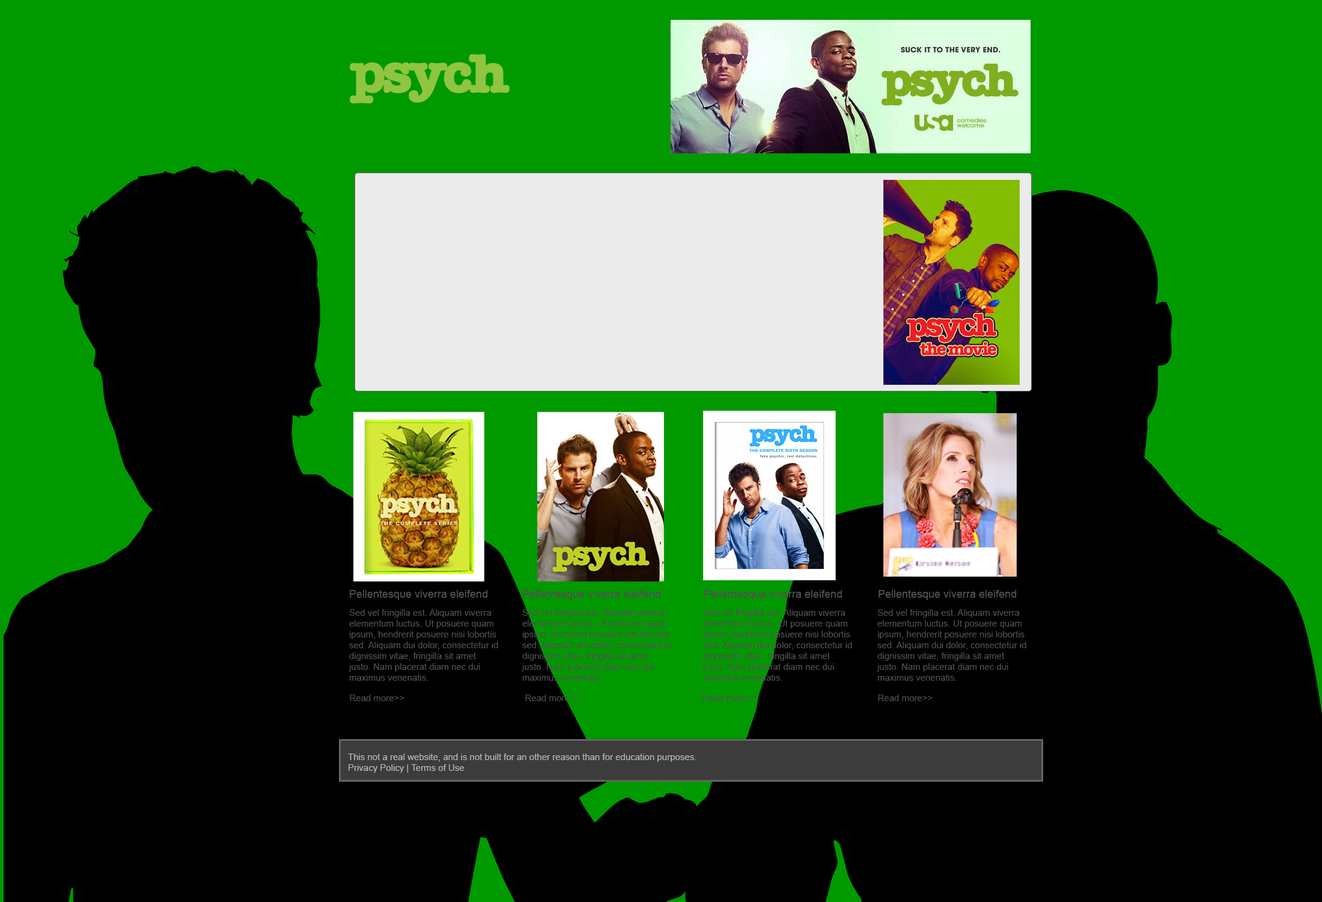
<style>
.page{position:relative;width:1322px;height:902px;background:#000000}
.page>*{position:absolute;margin:0}
.t1{font:10.8px "ArialMT";color:#4e4e4e}
.t2{font:9px "ArialMT";color:#4f4f4f}
.t3{font:9px "ArialMT";color:#4e4e4e}
.t4{font:9px "ArialMT";color:#bababa}
</style>
<div class="page">
<p class="t1" style="left:350px;top:590px;width:138px;height:10px">Pellentesque viverra eleifend ipsum ut sollicitudin.</p>
<p class="t1" style="left:523px;top:590px;width:138px;height:10px">Pellentesque viverra eleifend ipsum ut sollicitudin.</p>
<p class="t1" style="left:705px;top:590px;width:138px;height:10px">Pellentesque viverra eleifend ipsum ut sollicitudin.</p>
<p class="t1" style="left:879px;top:590px;width:138px;height:10px">Pellentesque viverra eleifend ipsum ut sollicitudin.</p>
<p class="t2" style="left:349px;top:609px;width:149px;height:71px">Sed vel fringilla est. Aliquam viverra elementum luctus. Ut posuere quam ipsum, hendrerit posuere nisi lobortis sed. Aliquam dui dolor, consectetur id dignissim vitae, fringilla sit amet justo. Nam placerat diam nec dui maximus venenatis.</p>
<p class="t3" style="left:522px;top:609px;width:149px;height:71px">Sed vel fringilla est. Aliquam viverra elementum luctus. Ut posuere quam ipsum, hendrerit posuere nisi lobortis sed. Aliquam dui dolor, consectetur id dignissim vitae, fringilla sit amet justo. Nam placerat diam nec dui maximus venenatis.</p>
<p class="t3" style="left:703px;top:609px;width:149px;height:71px">Sed vel fringilla est. Aliquam viverra elementum luctus. Ut posuere quam ipsum, hendrerit posuere nisi lobortis sed. Aliquam dui dolor, consectetur id dignissim vitae, fringilla sit amet justo. Nam placerat diam nec dui maximus venenatis.</p>
<p class="t3" style="left:877px;top:609px;width:150px;height:71px">Sed vel fringilla est. Aliquam viverra elementum luctus. Ut posuere quam ipsum, hendrerit posuere nisi lobortis sed. Aliquam dui dolor, consectetur id dignissim vitae, fringilla sit amet justo. Nam placerat diam nec dui maximus venenatis.</p>
<p class="t3" style="left:350px;top:694px;width:55px;height:7px">Read more&gt;&gt;</p>
<p class="t3" style="left:525px;top:694px;width:55px;height:7px">Read more&gt;&gt;</p>
<p class="t3" style="left:703px;top:694px;width:54px;height:7px">Read more&gt;&gt;</p>
<p class="t3" style="left:878px;top:694px;width:55px;height:7px">Read more&gt;&gt;</p>
<p class="t4" style="left:348px;top:753px;width:349px;height:19px">This not a real website, and is not built for an other reason than for education purposes. <br>Privacy Policy | Terms of Use</p>
</div>
